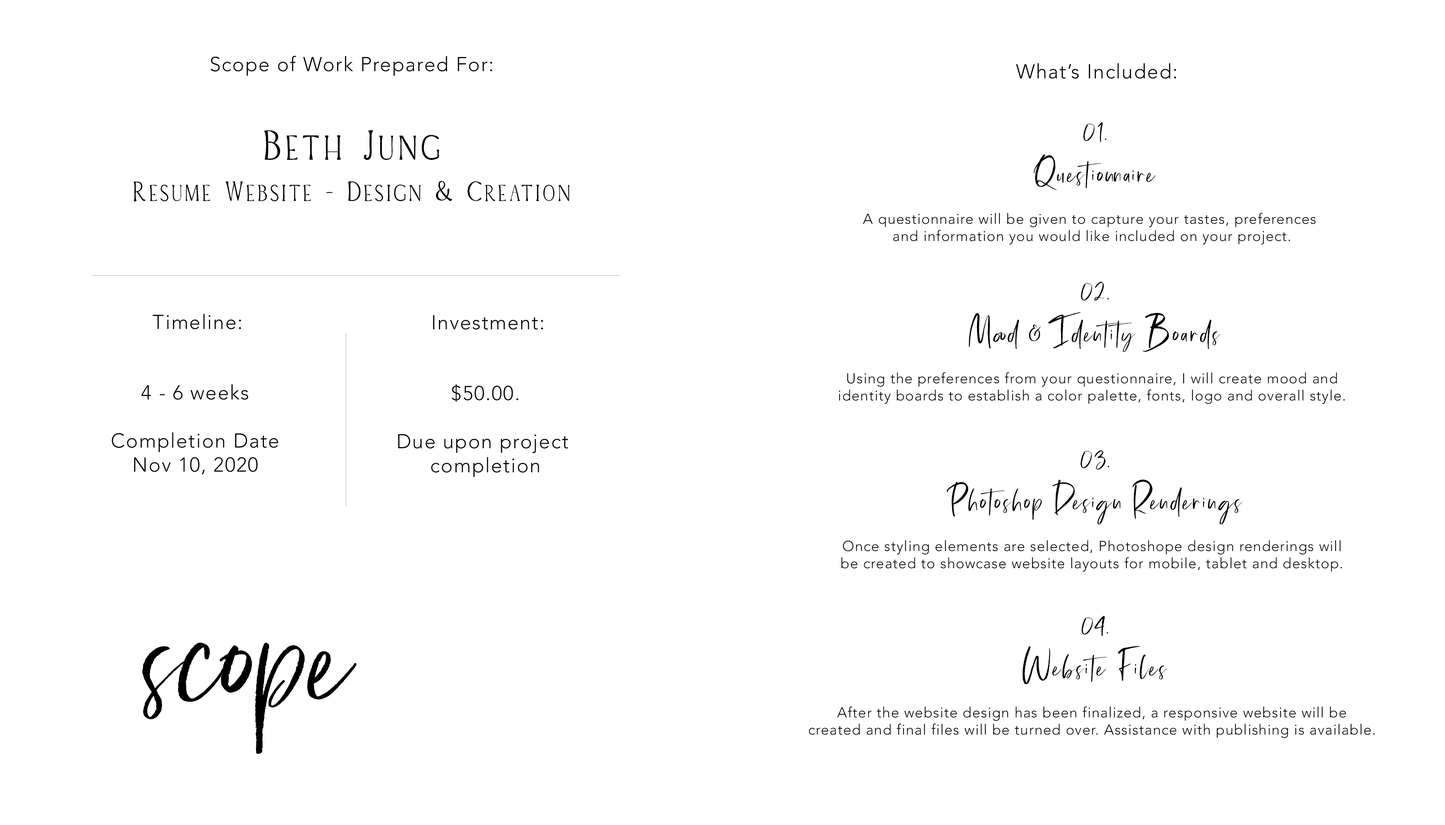
<style>
.page{position:relative;width:1445px;height:825px;background:#ffffff}
.page>*{position:absolute;margin:0}
.t1{font:20.1px "Avenir-Light";letter-spacing:0.05em;color:#000000}
.t2{font:34.4px "atlantis-Regular";letter-spacing:0.05em;color:#000000}
.t3{font:34.4px "AlohaParadise-Light";letter-spacing:0.05em;color:#000000}
.t4{font:51.6px "AlohaParadise-Light";letter-spacing:0.05em;color:#000000}
.t5{font:14.3px "Avenir-Light";letter-spacing:0.05em;color:#000000}
.t6{font:179.1px "atlantis-Regular";color:#000000}
</style>
<div class="page">
<p class="t1" style="left:210px;top:56px;width:282px;height:20px">Scope of Work Prepared For:</p>
<p class="t1" style="left:1016px;top:63px;width:160px;height:16px">What’s Included:</p>
<p class="t2" style="left:1033px;top:122px;width:123px;height:68px;text-align:center">01.<br>Questionnaire</p>
<p class="t3" style="left:133px;top:130px;width:437px;height:72px;text-align:center"><span class="t4">Beth Jung<br></span>Resume Website - Design &amp; Creation</p>
<p class="t5" style="left:863px;top:213px;width:452px;height:32px;text-align:center">A questionnaire will be given to capture your tastes, preferences <br>and information you would like included on your project.</p>
<p class="t2" style="left:969px;top:282px;width:252px;height:70px;text-align:center">02.<br>Mood &amp; Identity Boards</p>
<p class="t1" style="left:152px;top:314px;width:89px;height:15px">Timeline:</p>
<p class="t1" style="left:433px;top:315px;width:110px;height:15px">Investment:</p>
<p class="t5" style="left:839px;top:372px;width:505px;height:32px;text-align:center">Using the preferences from your questionnaire, I will create mood and<br>identity boards to establish a color palette, fonts, logo and overall style.</p>
<p class="t1" style="left:112px;top:385px;width:166px;height:90px;text-align:center">4 - 6 weeks<br><br>Completion Date<br>Nov 10, 2020</p>
<p class="t1" style="left:398px;top:385px;width:170px;height:92px;text-align:center">$50.00.<br><br>Due upon project <br>completion</p>
<p class="t2" style="left:947px;top:451px;width:296px;height:74px;text-align:center">03.<br>Photoshop Design Renderings</p>
<p class="t5" style="left:841px;top:540px;width:501px;height:32px;text-align:center">Once styling elements are selected, Photoshope design renderings will<br>be created to showcase website layouts for mobile, tablet and desktop.</p>
<p class="t2" style="left:1022px;top:616px;width:145px;height:69px;text-align:center">04.<br>Website Files</p>
<p class="t6" style="left:142px;top:643px;width:215px;height:112px">scope</p>
<p class="t5" style="left:809px;top:707px;width:565px;height:31px;text-align:center">After the website design has been finalized, a responsive website will be<br>created and final files will be turned over. Assistance with publishing is available.</p>
</div>
